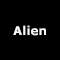
<style>
.page{position:relative;width:60px;height:60px;background:#000000}
.page>*{position:absolute;margin:0}
.t1{font:12px "Verdana-Bold";color:#f9f9f9}
</style>
<div class="page">
<p class="t1" style="left:13px;top:25px;width:33px;height:11px">Alien</p>
</div>
